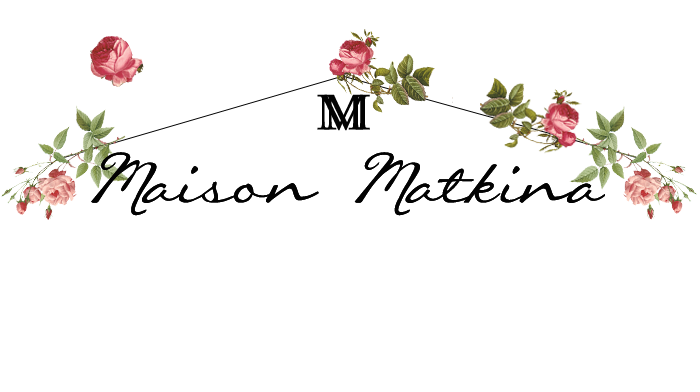
<style>
.page{position:relative;width:700px;height:392px;background:#ffffff}
.page>*{position:absolute;margin:0}
.t1{font:50px "BookAntiqua";color:#020202}
.t2{font:83.3px "ManhattanDarling";color:#020202}
</style>
<div class="page">
<p class="t1" style="left:317px;top:94px;width:46px;height:37px">M</p>
<p class="t1" style="left:324px;top:94px;width:46px;height:37px">M</p>
<p class="t2" style="left:91px;top:152px;width:514px;height:64px">Maison Matkina</p>
<p class="t2" style="left:91px;top:152px;width:514px;height:64px">Maison Matkina</p>
</div>
